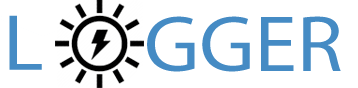
<style>
.page{position:relative;width:358px;height:88px;background:#ffffff}
.page>*{position:absolute;margin:0}
.t1{font:80px "MyriadPro-Regular";color:#458bc4;scale:1.07 1}
</style>
<div class="page">
<p class="t1" style="left:9px;top:15px;width:33px;height:55px">L</p>
<p class="t1" style="left:147px;top:16px;width:194px;height:56px">GGER</p>
</div>
